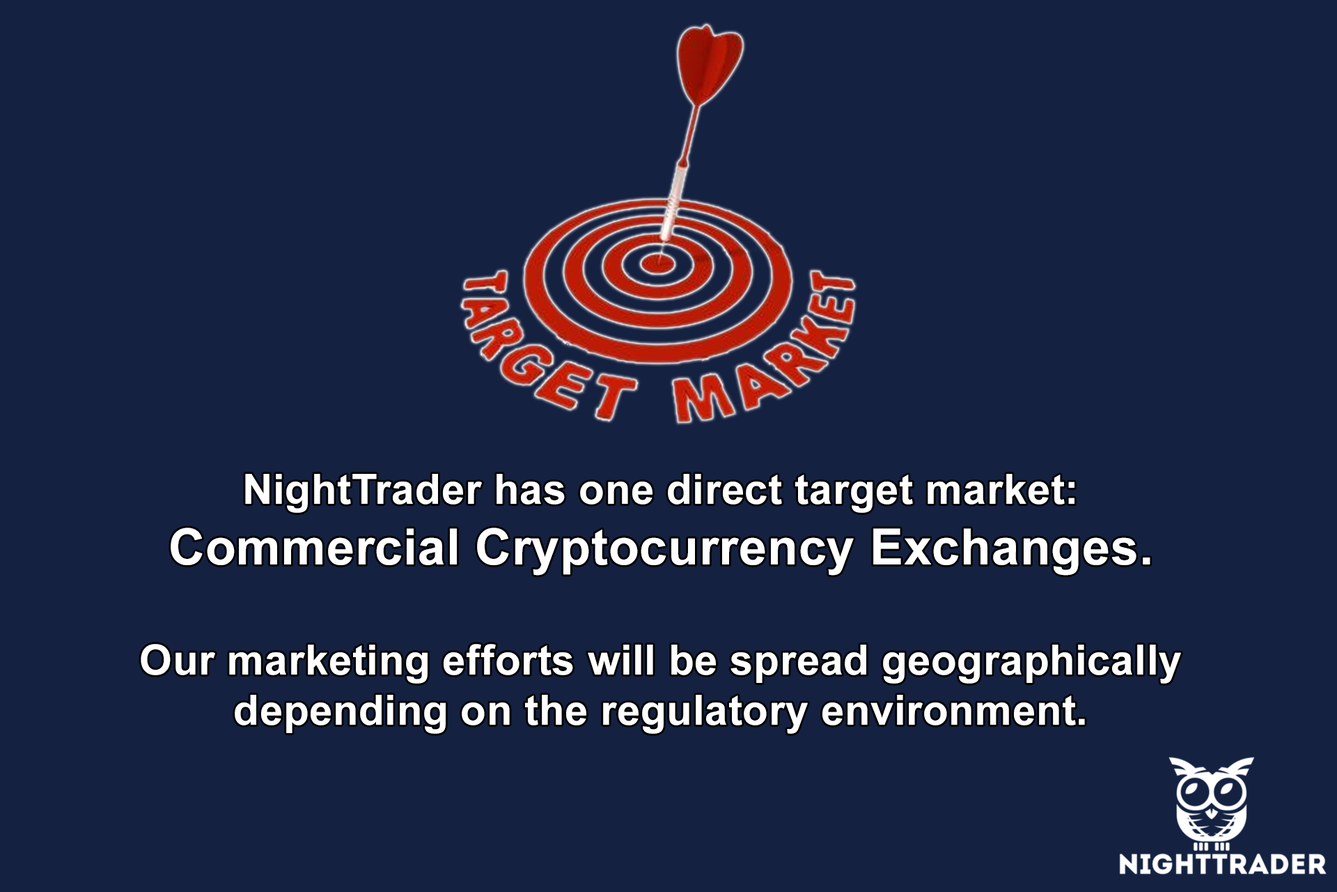
<style>
.page{position:relative;width:1337px;height:892px;background:#142141}
.page>*{position:absolute;margin:0}
.t1{font:41.8px "Arial-BoldMT";letter-spacing:0.01em;color:#ffffff}
.t2{font:50.2px "Arial-BoldMT";letter-spacing:0.01em;color:#ffffff}
</style>
<div class="page">
<p class="t1" style="left:141px;top:474px;width:1040px;height:259px;text-align:center">NightTrader has one direct target market:<br><span class="t2">Commercial Cryptocurrency Exchanges.<br><br></span>Our marketing efforts will be spread geographically depending on the regulatory environment.</p>
</div>
